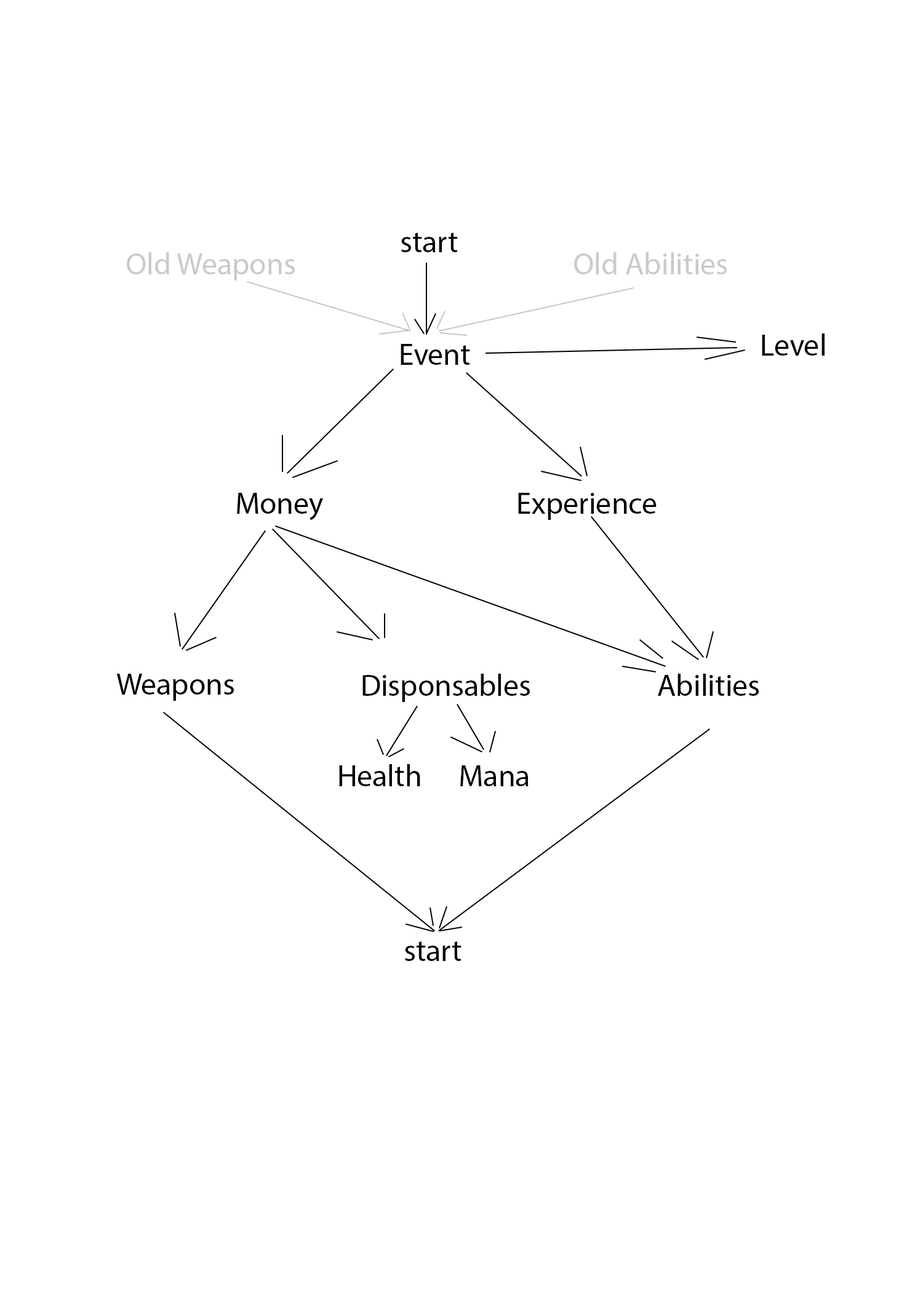
<style>
.page{position:relative;width:923px;height:1292px;background:#ffffff}
.page>*{position:absolute;margin:0}
.t1{font:30.8px "MyriadPro-Regular";color:#000000}
.t2{font:30.8px "MyriadPro-Regular";color:#cacaca}
</style>
<div class="page">
<p class="t1" style="left:401px;top:233px;width:57px;height:19px">start</p>
<p class="t2" style="left:127px;top:252px;width:168px;height:29px">Old Weapons</p>
<p class="t2" style="left:574px;top:252px;width:153px;height:22px">Old Abilities</p>
<p class="t1" style="left:762px;top:333px;width:62px;height:23px">Level</p>
<p class="t1" style="left:401px;top:344px;width:69px;height:21px">Event</p>
<p class="t1" style="left:237px;top:493px;width:86px;height:28px">Money</p>
<p class="t1" style="left:518px;top:493px;width:138px;height:27px">Experience</p>
<p class="t1" style="left:116px;top:674px;width:118px;height:27px">Weapons</p>
<p class="t1" style="left:362px;top:674px;width:168px;height:28px">Disponsables</p>
<p class="t1" style="left:658px;top:674px;width:101px;height:22px">Abilities</p>
<p class="t1" style="left:339px;top:764px;width:81px;height:22px">Health</p>
<p class="t1" style="left:460px;top:765px;width:69px;height:21px">Mana</p>
<p class="t1" style="left:405px;top:941px;width:56px;height:20px">start</p>
</div>
